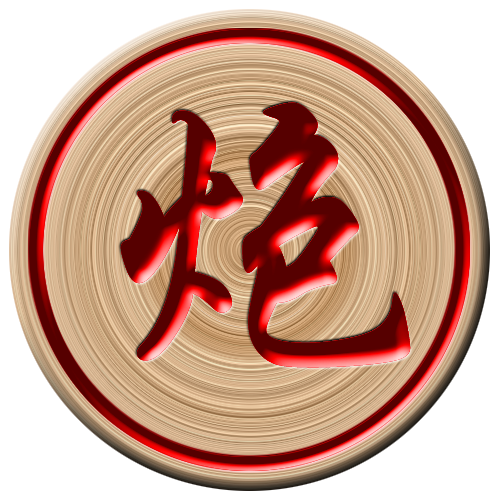
<style>
.page{position:relative;width:500px;height:500px;background:#ffffff}
.page>*{position:absolute;margin:0}
.t1{font:360px "STXingkai"}
</style>
<div class="page">
<p class="t1" style="left:120px;top:102px;width:291px;height:266px">炮</p>
</div>
